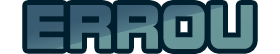
<style>
.page{position:relative;width:280px;height:54px;background:#001f2e}
.page>*{position:absolute;margin:0}
.t1{font:69.3px "DFSoGeiStd-W9";scale:0.92 1}
</style>
<div class="page">
<p class="t1" style="left:27px;top:5px;width:226px;height:44px">ERROU</p>
</div>
